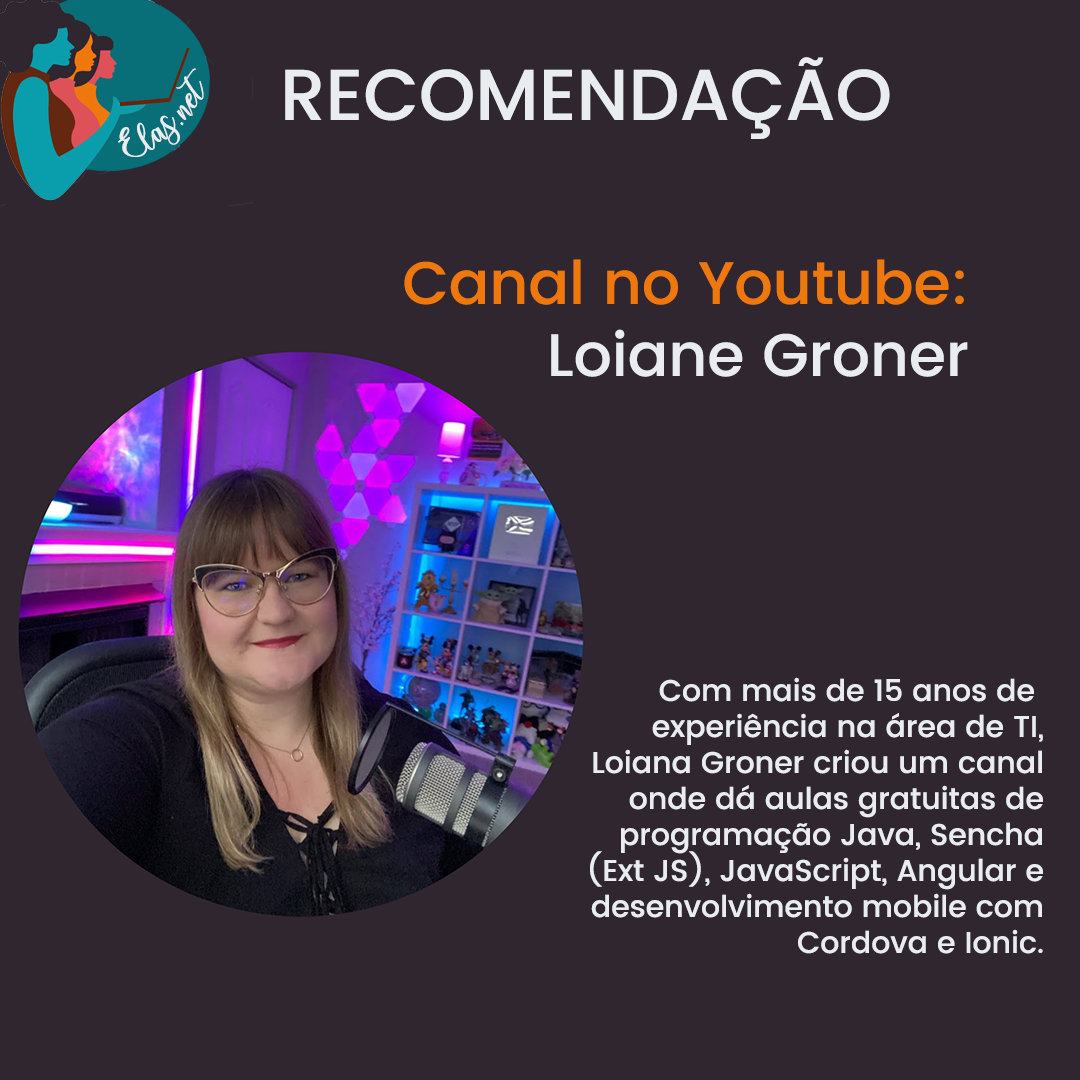
<style>
.page{position:relative;width:1080px;height:1080px;background:#2f262f}
.page>*{position:absolute;margin:0}
.t1{font:72px "Poppins-Medium";color:#e9edf0}
.t2{font:25px "charlinda-Regular";color:#e9edf0;scale:1.18 1}
.t3{font:60px "Poppins-Medium";color:#ef780d}
.t4{font:60px "Poppins-Medium";color:#e9edf0}
.t5{font:30px "Poppins-Medium";color:#e9edf0}
</style>
<div class="page">
<p class="t1" style="left:285px;top:57px;width:605px;height:82px">RECOMENDAÇÃO</p>
<p class="t2" style="left:118px;top:68px;width:86px;height:89px;rotate:-43deg">Elas.net</p>
<p class="t3" style="left:404px;top:259px;width:564px;height:118px;text-align:right">Canal no Youtube:<br><span class="t4">Loiane Groner</span></p>
<p class="t5" style="left:590px;top:677px;width:453px;height:277px;text-align:right">Com mais de 15 anos de <br>experiência na área de TI,<br>Loiana Groner criou um canal<br>onde dá aulas gratuitas de<br>programação Java, Sencha<br>(Ext JS), JavaScript, Angular e<br>desenvolvimento mobile com<br> Cordova e Ionic.</p>
</div>
